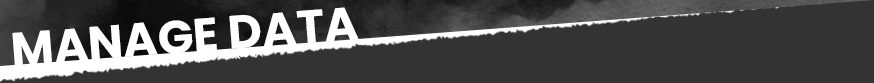
<style>
.page{position:relative;width:874px;height:83px;background:#333333}
.page>*{position:absolute;margin:0}
.t1{font:46.9px "Poppins-Bold";color:#ffffff;text-transform:uppercase}
</style>
<div class="page">
<p class="t1" style="left:12px;top:7px;width:347px;height:59px;rotate:-4deg">MANAGE DATA</p>
</div>
